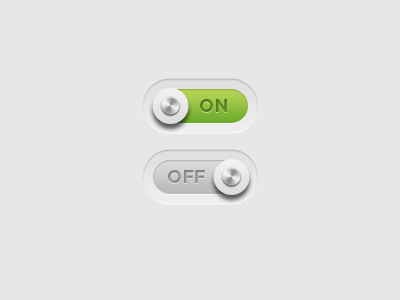
<style>
.page{position:relative;width:400px;height:300px;background:#e7e7e7}
.page>*{position:absolute;margin:0}
.t1{font:18px "Gotham-Bold";color:#669026}
.t2{font:18px "Gotham-Bold";color:#8c8c8c}
</style>
<div class="page">
<p class="t1" style="left:200px;top:99px;width:27px;height:13px">ON</p>
<p class="t2" style="left:168px;top:170px;width:37px;height:13px">OFF</p>
</div>
